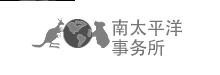
<style>
.page{position:relative;width:220px;height:75px;background:#ffffff}
.page>*{position:absolute;margin:0}
.t1{font:18px "AdobeHeitiStd-Regular";color:#767676}
</style>
<div class="page">
<p class="t1" style="left:112px;top:19px;width:70px;height:17px">南太平洋</p>
<p class="t1" style="left:112px;top:39px;width:53px;height:17px">事务所</p>
</div>
